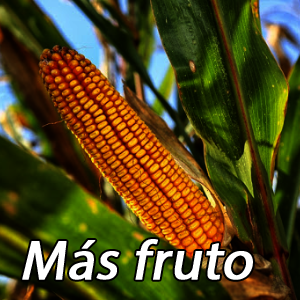
<style>
.page{position:relative;width:300px;height:300px}
.page>*{position:absolute;margin:0}
.t1{font:55.6px "MyriadPro-Regular";color:#ffffff;font-weight:bold;font-style:italic}
</style>
<div class="page">
<p class="t1" style="left:22px;top:239px;width:231px;height:41px">Más fruto</p>
</div>
